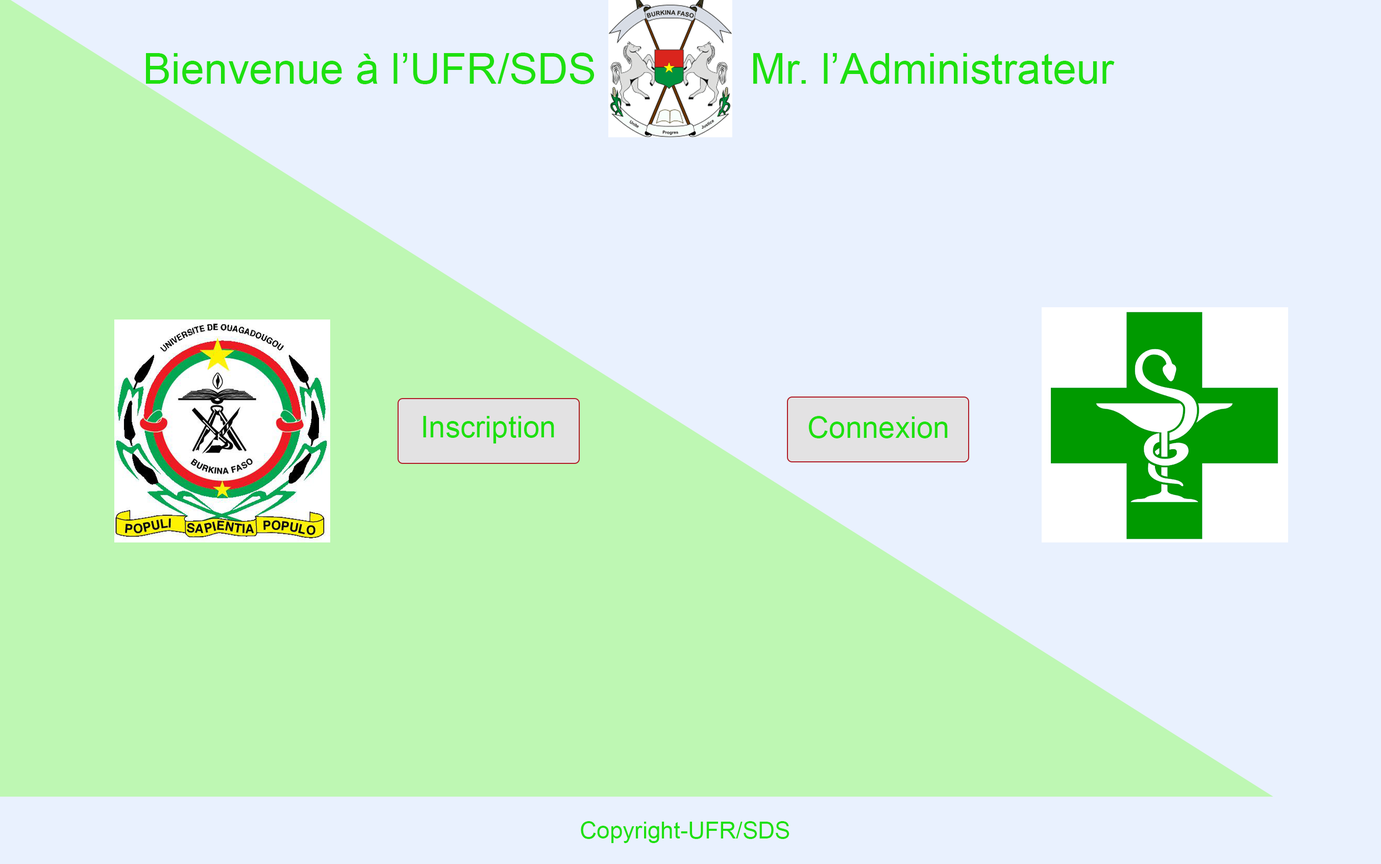
<style>
.page{position:relative;width:1381px;height:864px;background:#e9f1fe}
.page>*{position:absolute;margin:0}
.t1{font:42.5px "ArialMT";color:#1ee00f}
.t2{font:29.8px "ArialMT";color:#1ee00f}
.t3{font:23.4px "ArialMT";color:#1ee00f}
</style>
<div class="page">
<p class="t1" style="left:146px;top:53px;width:968px;height:31px">Bienvenue à l’UFR/SDS             Mr. l’Administrateur</p>
<p class="t2" style="left:423px;top:416px;width:131px;height:27px">Inscription</p>
<p class="t2" style="left:808px;top:416px;width:139px;height:22px">Connexion</p>
<p class="t3" style="left:581px;top:821px;width:208px;height:22px">Copyright-UFR/SDS</p>
</div>
